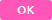
<style>
.page{position:relative;width:52px;height:20px;background:#ff56b9}
.page>*{position:absolute;margin:0}
.t1{font:12px "Ubuntu-Medium";color:#ffffff}
</style>
<div class="page">
<p class="t1" style="left:17px;top:6px;width:18px;height:8px">OK</p>
</div>
